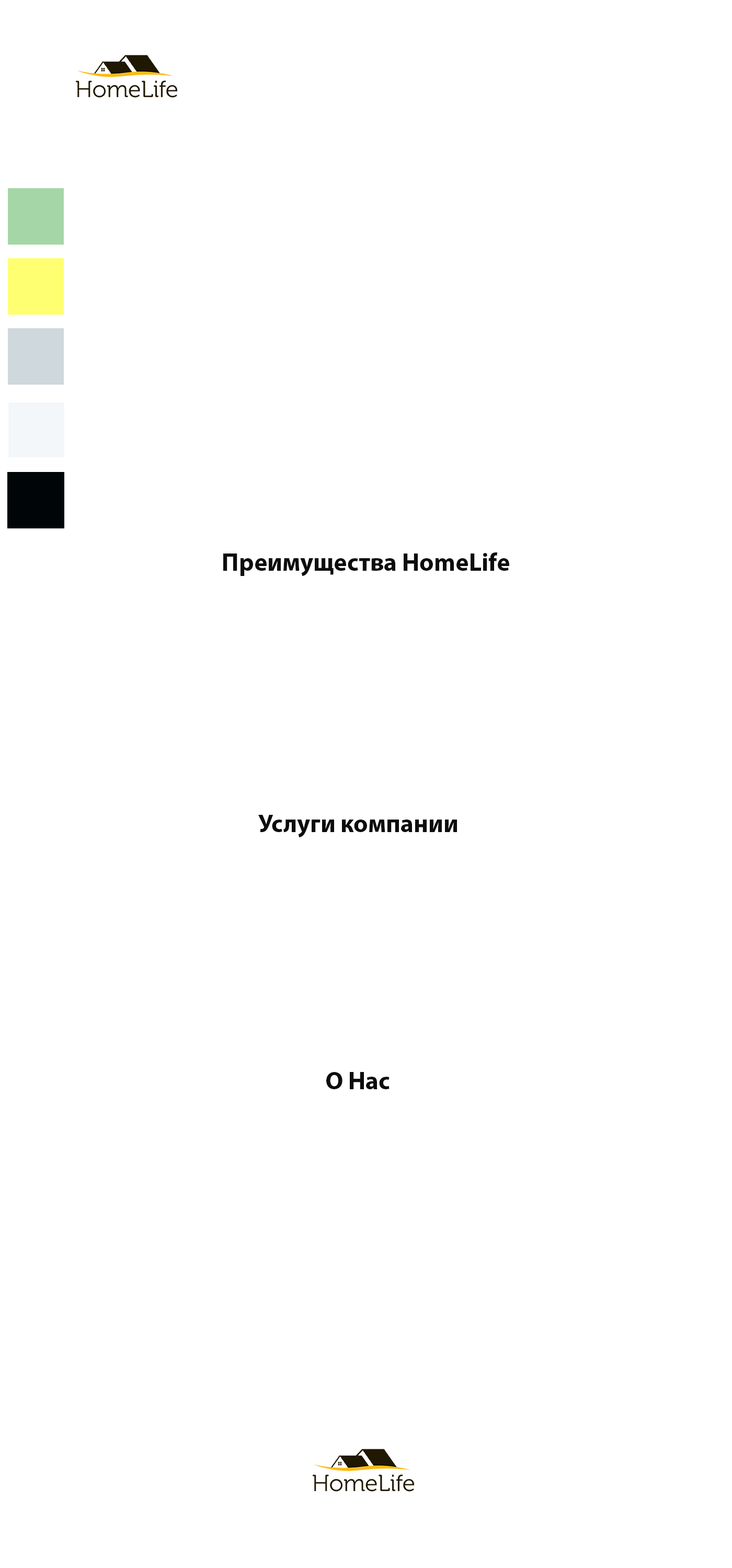
<style>
.page{position:relative;width:732px;height:1568px;background:#ffffff}
.page>*{position:absolute;margin:0}
.t1{font:25.1px "MyriadPro-Bold";color:#0c0d0c}
</style>
<div class="page">
<p class="t1" style="left:223px;top:552px;width:286px;height:24px">Преимущества HomeLife</p>
<p class="t1" style="left:258px;top:815px;width:199px;height:22px">Услуги компании</p>
<p class="t1" style="left:326px;top:1072px;width:63px;height:17px">О Нас</p>
</div>
